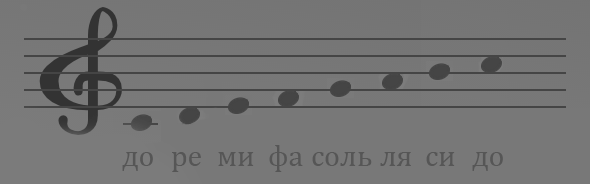
<style>
.page{position:relative;width:590px;height:184px;background:#787878}
.page>*{position:absolute;margin:0}
.t1{font:30px "Cambria";color:#565656}
</style>
<div class="page">
<p class="t1" style="left:269px;top:145px;width:34px;height:27px">фа</p>
<p class="t1" style="left:122px;top:152px;width:31px;height:19px">до</p>
<p class="t1" style="left:172px;top:152px;width:29px;height:20px">ре</p>
<p class="t1" style="left:218px;top:152px;width:36px;height:14px">ми</p>
<p class="t1" style="left:312px;top:152px;width:60px;height:14px">соль</p>
<p class="t1" style="left:380px;top:152px;width:31px;height:14px">ля</p>
<p class="t1" style="left:426px;top:152px;width:29px;height:14px">си</p>
<p class="t1" style="left:472px;top:152px;width:31px;height:19px">до</p>
</div>
